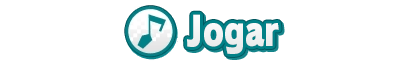
<style>
.page{position:relative;width:400px;height:64px;background:#ffffff}
.page>*{position:absolute;margin:0}
.t1{font:40px "RodinPro-UB";color:#f1f2f3;scale:0.78 1}
</style>
<div class="page">
<p class="t1" style="left:187px;top:14px;width:92px;height:40px">Jogar</p>
</div>
